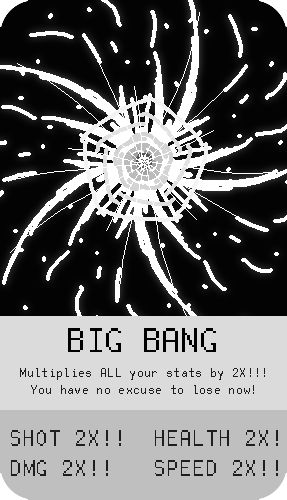
<style>
.page{position:relative;width:287px;height:500px}
.page>*{position:absolute;margin:0}
.t1{font:37.5px "FreePixel-Regular";color:#000000}
.t2{font:14.1px "FreePixel-Regular";color:#1e1e1e}
.t3{font:25px "FreePixel-Regular";color:#1e1e1e}
</style>
<div class="page">
<p class="t1" style="left:68px;top:328px;width:148px;height:24px">BIG BANG</p>
<p class="t2" style="left:20px;top:368px;width:245px;height:26px;text-align:center">Multiplies ALL your stats by 2X!!!<br>You have no excuse to lose now!</p>
<p class="t3" style="left:11px;top:430px;width:267px;height:46px">SHOT 2X!! HEALTH 2X!<br>DMG 2X!!  SPEED 2X!!</p>
</div>
